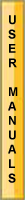
<style>
.page{position:relative;width:25px;height:200px}
.page>*{position:absolute;margin:0}
.t1{font:12px "Arial-BoldMT";color:#000000}
</style>
<div class="page">
<p class="t1" style="left:8px;top:15px;width:10px;height:168px">U<br>S<br>E<br>R<br><br>M<br>A<br>N<br>U<br>A<br>L<br>S</p>
</div>
